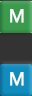
<style>
.page{position:relative;width:32px;height:96px;background:#333333}
.page>*{position:absolute;margin:0}
.t1{font:18px "OpenSans";letter-spacing:0.012em;color:#fefefe;font-weight:bold}
</style>
<div class="page">
<p class="t1" style="left:10px;top:9px;width:14px;height:14px">M</p>
<p class="t1" style="left:10px;top:72px;width:14px;height:14px">M</p>
</div>
